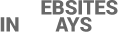
<style>
.page{position:relative;width:118px;height:32px;background:#ffffff}
.page>*{position:absolute;margin:0}
.t1{font:20px/17px "Roboto-Black";color:#686868;text-transform:uppercase}
.t2{font:20px/17px "Roboto-Black";color:#ffffff;text-transform:uppercase}
</style>
<div class="page">
<p class="t1" style="left:0px;top:0px;width:118px;height:32px"><span class="t2">33W</span>ebsites<br>in<span class="t2">33D</span>ays</p>
</div>
